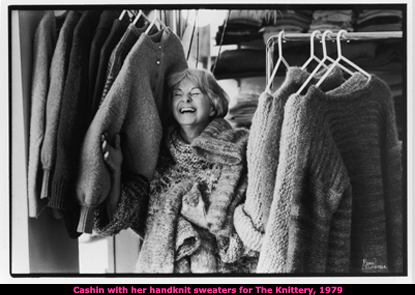
<style>
.page{position:relative;width:415px;height:295px}
.page>*{position:absolute;margin:0}
.t1{font:8.3px "Verdana-Bold";color:#ff3399}
</style>
<div class="page">
<p class="t1" style="left:73px;top:286px;width:270px;height:9px">Cashin with her handknit sweaters for The Knittery, 1979</p>
</div>
